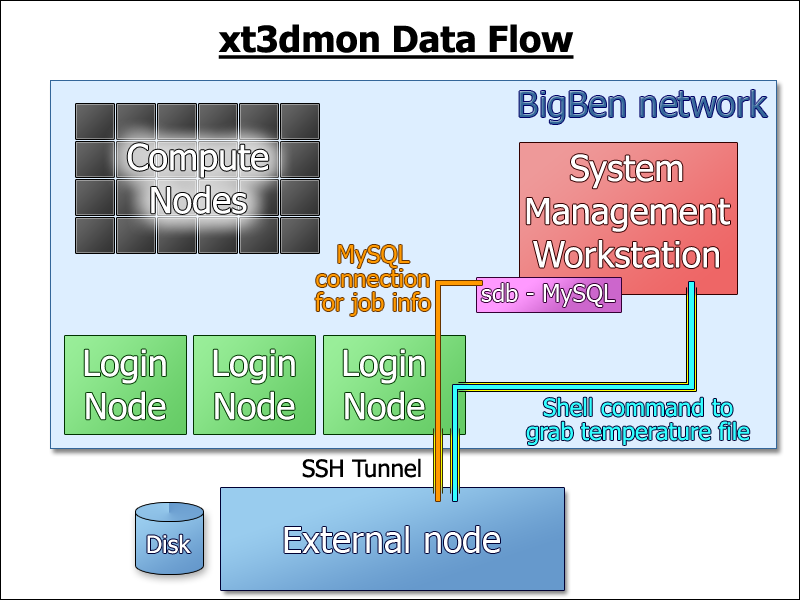
<style>
.page{position:relative;width:800px;height:600px;background:#ffffff}
.page>*{position:absolute;margin:0}
.t1{font:36px "Tahoma-Bold";color:#000000;text-decoration:underline}
.t2{font:36px "Tahoma";color:#336699}
.t3{font:36px "Tahoma";color:#ffffff}
.t4{font:24px/24px "Tahoma";color:#ff9900}
.t5{font:24px "Tahoma";color:#ffffff}
.t6{font:24px/24px "Tahoma";color:#33ffff}
.t7{font:24px "Tahoma";color:#000000}
</style>
<div class="page">
<p class="t1" style="left:218px;top:24px;width:356px;height:35px">xt3dmon Data Flow</p>
<p class="t2" style="left:519px;top:90px;width:249px;height:34px">BigBen network</p>
<p class="t3" style="left:127px;top:143px;width:142px;height:71px;text-align:center">Compute<br>Nodes</p>
<p class="t3" style="left:526px;top:154px;width:204px;height:114px;text-align:center">System<br>Management<br>Workstation</p>
<p class="t4" style="left:315px;top:245px;width:116px;height:71px;text-align:center">MySQL<br>connection<br>for job info</p>
<p class="t5" style="left:481px;top:283px;width:134px;height:24px">sdb - MySQL</p>
<p class="t3" style="left:84px;top:349px;width:82px;height:71px;text-align:center">Login<br>Node</p>
<p class="t3" style="left:213px;top:349px;width:82px;height:71px;text-align:center">Login<br>Node</p>
<p class="t3" style="left:343px;top:349px;width:82px;height:71px;text-align:center">Login<br>Node</p>
<p class="t6" style="left:526px;top:397px;width:224px;height:48px;text-align:center">Shell command to<br>grab temperature file</p>
<p class="t7" style="left:302px;top:458px;width:119px;height:20px">SSH Tunnel</p>
<p class="t5" style="left:147px;top:534px;width:44px;height:20px">Disk</p>
<p class="t3" style="left:284px;top:526px;width:216px;height:27px">External node</p>
</div>
